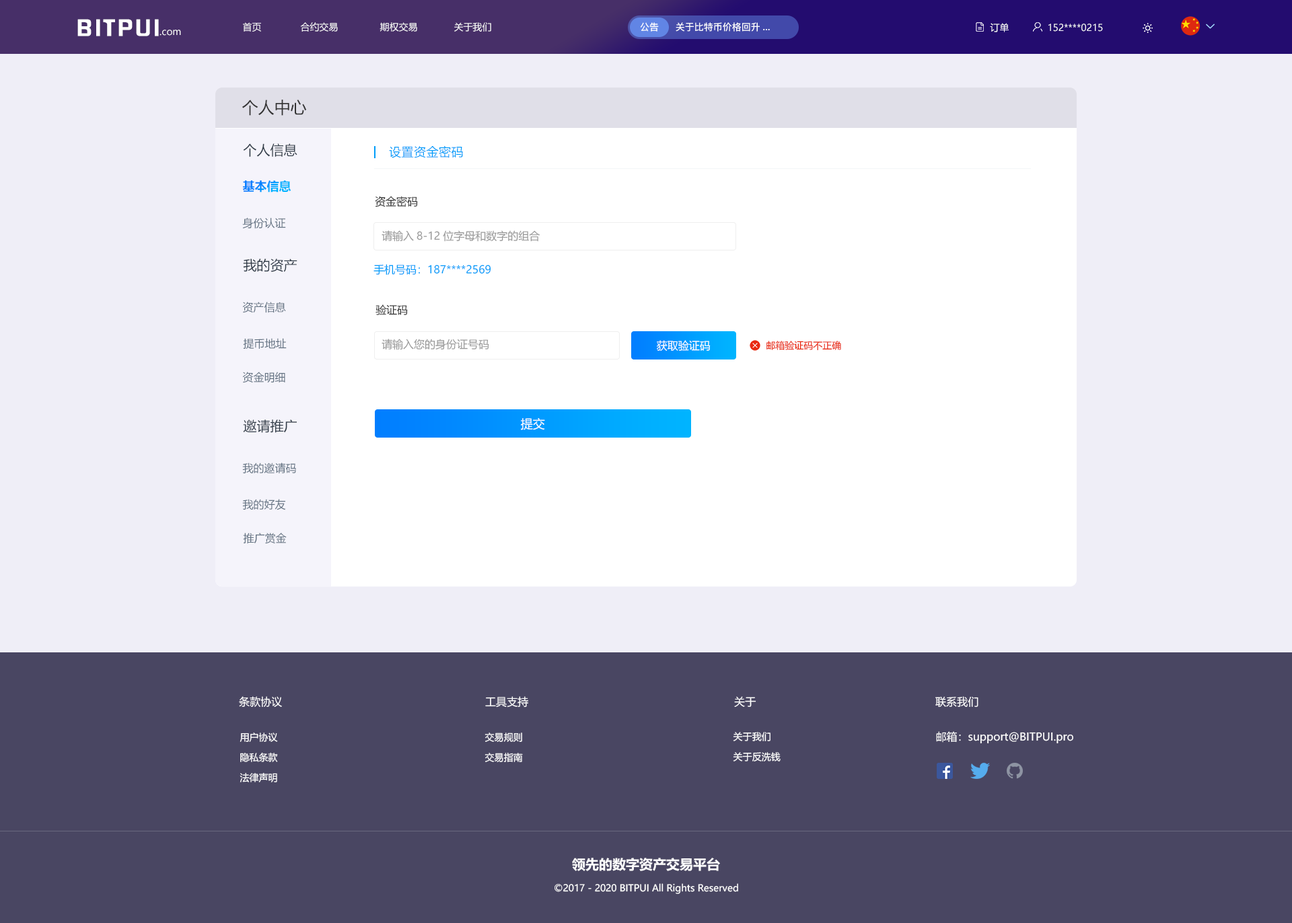
<style>
.page{position:relative;width:1292px;height:923px;background:#efeef7}
.page>*{position:absolute;margin:0}
.t1{font:20.6px "FZHZGBJW--GB1-0";letter-spacing:0.1em;color:#ffffff;scale:1.14 1}
.t2{font:9.4px "MicrosoftYaHei";color:#ffffff}
.t3{font:9.4px "PingFang-SC-Bold";color:#ffffff}
.t4{font:16.2px "MicrosoftYaHei";color:#333333}
.t5{font:13.5px "MicrosoftYaHei";color:#303b47}
.t6{font:12.1px "MicrosoftYaHei";letter-spacing:0.03em;color:#009dfa}
.t7{font:12.1px "MicrosoftYaHei-Bold";color:#009dfa}
.t8{font:10.8px "MicrosoftYaHei";color:#333333}
.t9{font:10.8px "MicrosoftYaHei";color:#637282}
.t10{font:10.8px "MicrosoftYaHei";color:#999999}
.t11{font:10.8px "MicrosoftYaHei";color:#009dfa}
.t12{font:10.8px "MicrosoftYaHei";color:#ffffff}
.t13{font:9.4px "MicrosoftYaHei";color:#e92a11}
.t14{font:12.1px "MicrosoftYaHei";color:#ffffff}
.t15{font:9.4px/20.2px "MicrosoftYaHei";color:#ffffff}
.t16{font:13.5px "MicrosoftYaHei-Bold";color:#ffffff}
</style>
<div class="page">
<p class="t1" style="left:77px;top:19px;width:82px;height:17px">BITPUI</p>
<p class="t2" style="left:160px;top:30px;width:21px;height:6px">.com</p>
<p class="t2" style="left:243px;top:22px;width:248px;height:10px">首页              合约交易               期权交易             关于我们</p>
<p class="t3" style="left:640px;top:22px;width:19px;height:10px">公告</p>
<p class="t3" style="left:676px;top:22px;width:94px;height:10px">关于比特币价格回升...</p>
<p class="t2" style="left:990px;top:23px;width:19px;height:9px">订单</p>
<p class="t2" style="left:1049px;top:24px;width:54px;height:8px">152****0215</p>
<p class="t4" style="left:242px;top:100px;width:65px;height:16px">个人中心</p>
<p class="t5" style="left:243px;top:143px;width:54px;height:14px">个人信息</p>
<p class="t6" style="left:389px;top:145px;width:74px;height:13px">设置资金密码</p>
<p class="t7" style="left:242px;top:180px;width:49px;height:12px">基本信息</p>
<p class="t8" style="left:375px;top:196px;width:43px;height:11px">资金密码</p>
<p class="t9" style="left:242px;top:217px;width:44px;height:12px">身份认证</p>
<p class="t10" style="left:382px;top:230px;width:158px;height:12px">请输入8-12位字母和数字的组合</p>
<p class="t5" style="left:243px;top:258px;width:54px;height:14px">我的资产</p>
<p class="t11" style="left:374px;top:264px;width:117px;height:11px">手机号码：187****2569</p>
<p class="t9" style="left:242px;top:302px;width:44px;height:11px">资产信息</p>
<p class="t8" style="left:376px;top:304px;width:32px;height:11px">验证码</p>
<p class="t9" style="left:243px;top:338px;width:44px;height:11px">提币地址</p>
<p class="t10" style="left:382px;top:339px;width:107px;height:11px">请输入您的身份证号码</p>
<p class="t12" style="left:657px;top:340px;width:54px;height:11px">获取验证码</p>
<p class="t13" style="left:767px;top:341px;width:74px;height:10px">邮箱验证码不正确</p>
<p class="t9" style="left:242px;top:372px;width:43px;height:11px">资金明细</p>
<p class="t5" style="left:243px;top:419px;width:54px;height:14px">邀请推广</p>
<p class="t14" style="left:521px;top:418px;width:24px;height:12px">提交</p>
<p class="t9" style="left:242px;top:462px;width:54px;height:11px">我的邀请码</p>
<p class="t9" style="left:242px;top:499px;width:44px;height:11px">我的好友</p>
<p class="t9" style="left:243px;top:532px;width:44px;height:12px">推广赏金</p>
<p class="t12" style="left:239px;top:696px;width:43px;height:11px">条款协议</p>
<p class="t12" style="left:485px;top:696px;width:43px;height:11px">工具支持</p>
<p class="t12" style="left:734px;top:696px;width:23px;height:11px">关于</p>
<p class="t12" style="left:936px;top:696px;width:43px;height:11px">联系我们</p>
<p class="t15" style="left:240px;top:732px;width:38px;height:50px;text-align:center">用户协议<br>隐私条款<br>法律声明</p>
<p class="t15" style="left:485px;top:732px;width:38px;height:30px">交易规则<br>交易指南</p>
<p class="t15" style="left:733px;top:732px;width:48px;height:29px">关于我们<br>关于反洗钱</p>
<p class="t12" style="left:936px;top:731px;width:138px;height:13px">邮箱：support@BITPUI.pro</p>
<p class="t16" style="left:572px;top:857px;width:148px;height:14px">领先的数字资产交易平台</p>
<p class="t2" style="left:555px;top:883px;width:183px;height:11px">©2017 - 2020 BITPUI All Rights Reserved</p>
</div>
